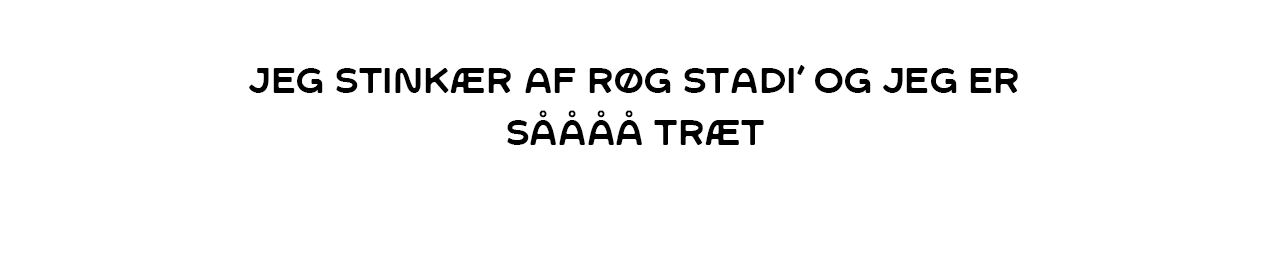
<style>
.page{position:relative;width:1267px;height:279px;background:#ffffff}
.page>*{position:absolute;margin:0}
.t1{font:35.4px/52.1px "SFCWosterSans-Regular";letter-spacing:0.001em;color:#000000}
</style>
<div class="page">
<p class="t1" style="left:249px;top:65px;width:769px;height:80px;text-align:center">Jeg stinkær af røg stadi’ og jeg er såååå træt</p>
</div>
